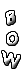
<style>
.page{position:relative;width:22px;height:80px;background:#ffffff}
.page>*{position:absolute;margin:0}
.t1{font:18px/8.3px "EstrangeloEdessa";letter-spacing:0.1em;color:#ffffff;text-transform:uppercase}
</style>
<div class="page">
<p class="t1" style="left:2px;top:11px;width:18px;height:57px;text-align:center">bow</p>
</div>
